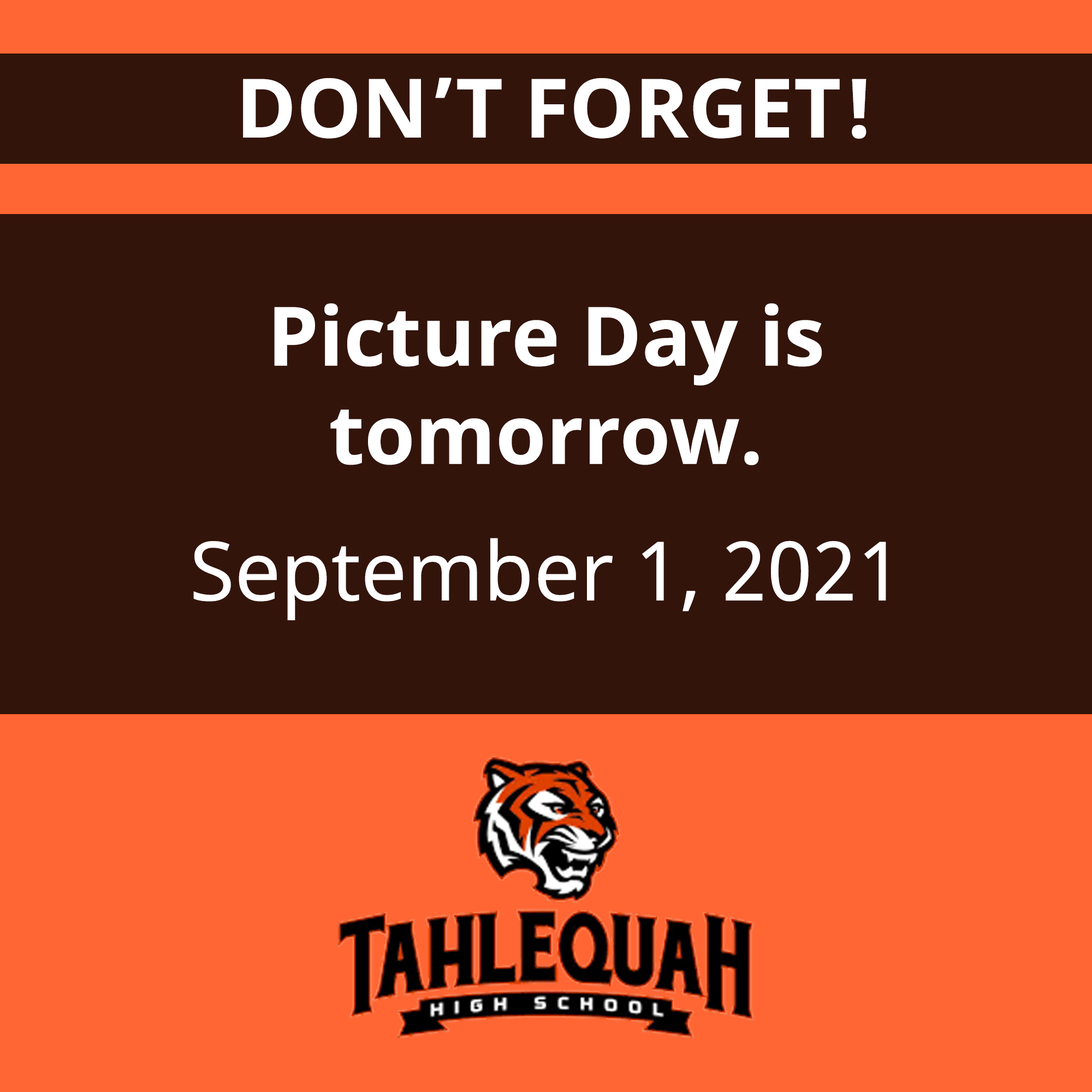
<style>
.page{position:relative;width:1092px;height:1092px;background:#33140a}
.page>*{position:absolute;margin:0}
.t1{font:81.9px "NotoSans-Bold";color:#ffffff}
.t2{font:81.9px/136.5px "NotoSans";color:#ffffff}
.t3{font:81.9px/50px "NotoSans-Bold";color:#ffffff}
</style>
<div class="page">
<p class="t1" style="left:243px;top:78px;width:623px;height:61px">DON’T FORGET!</p>
<p class="t2" style="left:193px;top:303px;width:693px;height:317px;text-align:center"><span class="t3">Picture Day is<br></span><span class="t1">tomorrow.<br></span>September 1, 2021</p>
</div>
